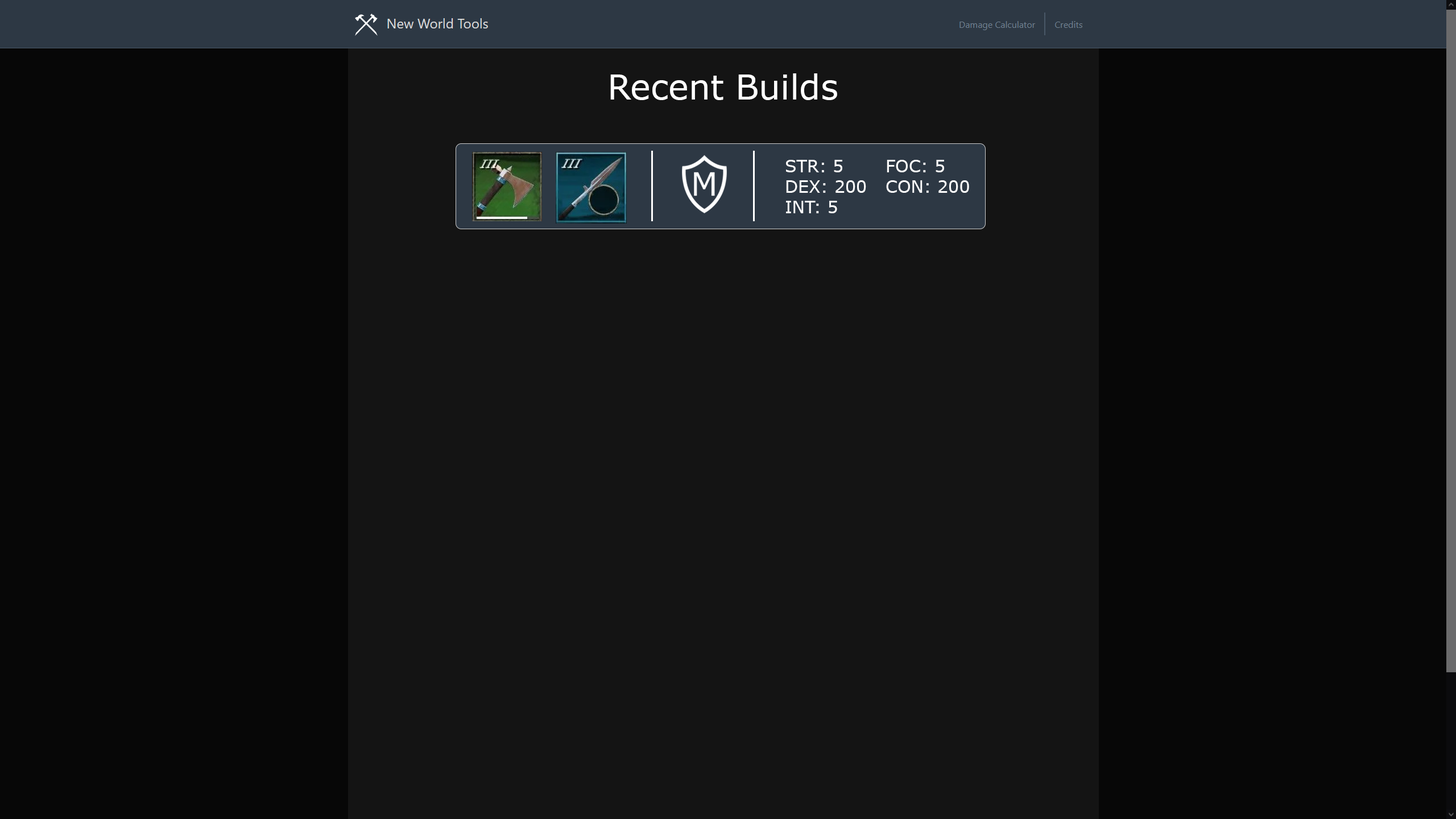
<style>
.page{position:relative;width:1456px;height:819px;background:#070707}
.page>*{position:absolute;margin:0}
.t1{font:34.1px "MSReferenceSansSerif";color:#ffffff}
.t2{font:17.1px "MSReferenceSansSerif";color:#ffffff}
</style>
<div class="page">
<p class="t1" style="left:610px;top:73px;width:227px;height:27px">Recent Builds</p>
<p class="t2" style="left:786px;top:160px;width:80px;height:53px">STR: 5<br>DEX: 200<br>INT: 5</p>
<p class="t2" style="left:886px;top:160px;width:83px;height:33px">FOC: 5<br>CON: 200</p>
</div>
